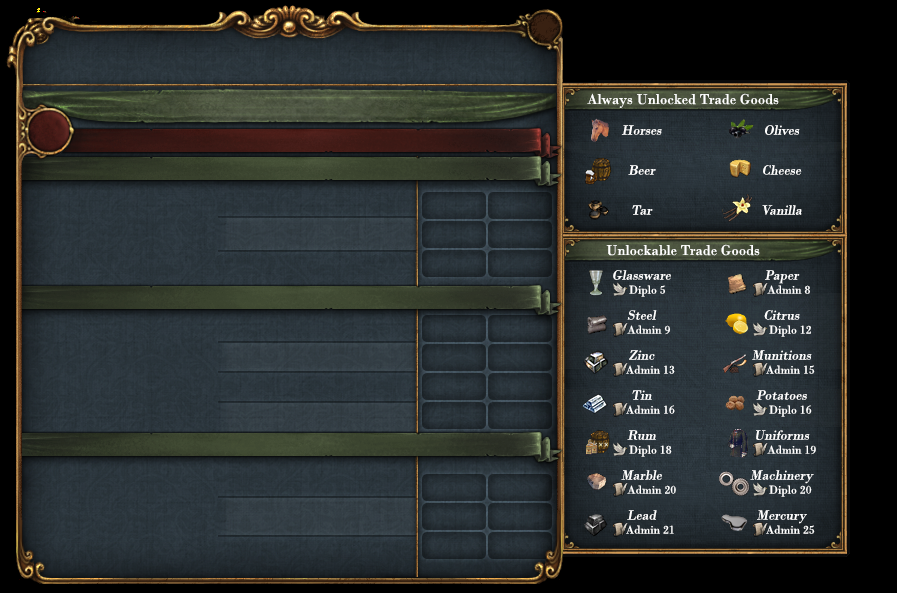
<style>
.page{position:relative;width:897px;height:593px}
.page>*{position:absolute;margin:0}
.t1{font:15px "BodoniMT";color:#ffffff}
.t2{font:14px "BodoniMT";color:#ffffff;font-style:italic}
.t3{font:14px/14px "BodoniMT";color:#ffffff;font-style:italic}
.t4{font:12px/14px "BodoniMT";color:#ffffff}
</style>
<div class="page">
<p class="t1" style="left:587px;top:93px;width:192px;height:15px">Always Unlocked Trade Goods</p>
<p class="t2" style="left:621px;top:125px;width:41px;height:10px">Horses</p>
<p class="t2" style="left:765px;top:125px;width:35px;height:10px">Olives</p>
<p class="t2" style="left:628px;top:165px;width:28px;height:10px">Beer</p>
<p class="t2" style="left:763px;top:165px;width:39px;height:10px">Cheese</p>
<p class="t2" style="left:632px;top:205px;width:21px;height:10px">Tar</p>
<p class="t2" style="left:762px;top:205px;width:40px;height:10px">Vanilla</p>
<p class="t1" style="left:606px;top:244px;width:154px;height:12px">Unlockable Trade Goods</p>
<p class="t3" style="left:613px;top:270px;width:58px;height:27px;text-align:center">Glassware<br><span class="t4">    Diplo 5</span></p>
<p class="t4" style="left:765px;top:270px;width:45px;height:24px;text-align:center"><span class="t3">Paper<br></span>     Admin 8</p>
<p class="t4" style="left:627px;top:310px;width:43px;height:25px;text-align:center"><span class="t3">Steel<br></span>     Admin 9</p>
<p class="t4" style="left:764px;top:310px;width:47px;height:27px;text-align:center"><span class="t3">Citrus<br></span>      Diplo 12</p>
<p class="t4" style="left:626px;top:350px;width:49px;height:24px;text-align:center"><span class="t3">Zinc<br></span>      Admin 13</p>
<p class="t3" style="left:752px;top:350px;width:63px;height:24px;text-align:center">Munitions<br><span class="t4">      Admin 15</span></p>
<p class="t4" style="left:626px;top:390px;width:49px;height:24px;text-align:center"><span class="t3">Tin<br></span>      Admin 16</p>
<p class="t3" style="left:756px;top:390px;width:56px;height:27px;text-align:center">Potatoes<br><span class="t4">      Diplo 16</span></p>
<p class="t4" style="left:627px;top:430px;width:45px;height:27px;text-align:center"><span class="t3">Rum<br></span>      Diplo 18</p>
<p class="t3" style="left:756px;top:430px;width:60px;height:25px;text-align:center">Uniforms<br><span class="t4">       Admin 19</span></p>
<p class="t4" style="left:621px;top:470px;width:55px;height:24px;text-align:center"><span class="t3">Marble<br></span>       Admin 20</p>
<p class="t3" style="left:750px;top:470px;width:64px;height:27px;text-align:center">Machinery<br><span class="t4">      Diplo 20</span></p>
<p class="t4" style="left:626px;top:510px;width:48px;height:24px;text-align:center"><span class="t3">Lead<br></span>      Admin 21</p>
<p class="t4" style="left:757px;top:510px;width:58px;height:24px;text-align:center"><span class="t3">Mercury<br></span>      Admin 25</p>
</div>
